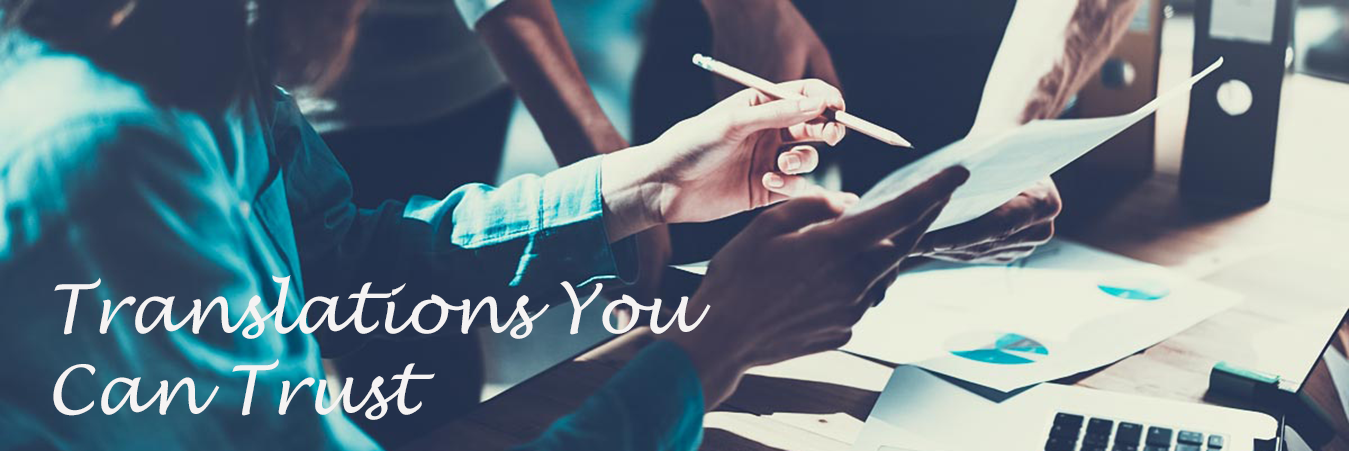
<style>
.page{position:relative;width:1349px;height:451px}
.page>*{position:absolute;margin:0}
.t1{font:67.5px "LucidaHandwriting-Italic";color:#f5f3f3}
</style>
<div class="page">
<p class="t1" style="left:53px;top:275px;width:658px;height:145px">Translations You <br>Can Trust</p>
</div>
